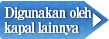
<style>
.page{position:relative;width:109px;height:39px;background:#ffffff}
.page>*{position:absolute;margin:0}
.t1{font:15px/13px "RyuminPro-ExBold";letter-spacing:-0.08em;color:#ffffff;scale:0.9 1}
</style>
<div class="page">
<p class="t1" style="left:4px;top:7px;width:98px;height:28px;text-align:right">Digunakan oleh▶<br>kapal lainnya</p>
</div>
